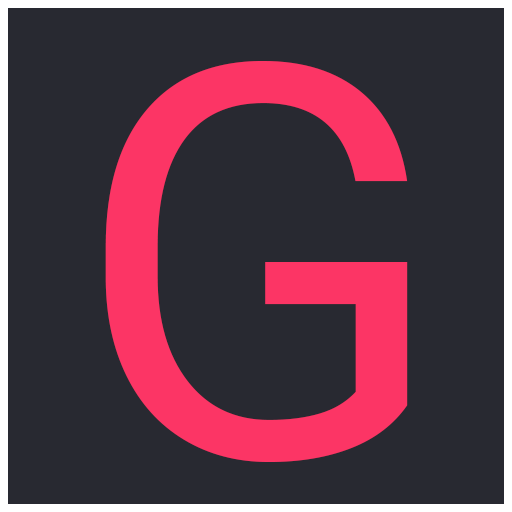
<style>
.page{position:relative;width:512px;height:512px;background:#282931}
.page>*{position:absolute;margin:0}
.t1{font:550px "Roboto-Regular";color:#fc3565}
</style>
<div class="page">
<p class="t1" style="left:105px;top:61px;width:303px;height:401px">G</p>
</div>
